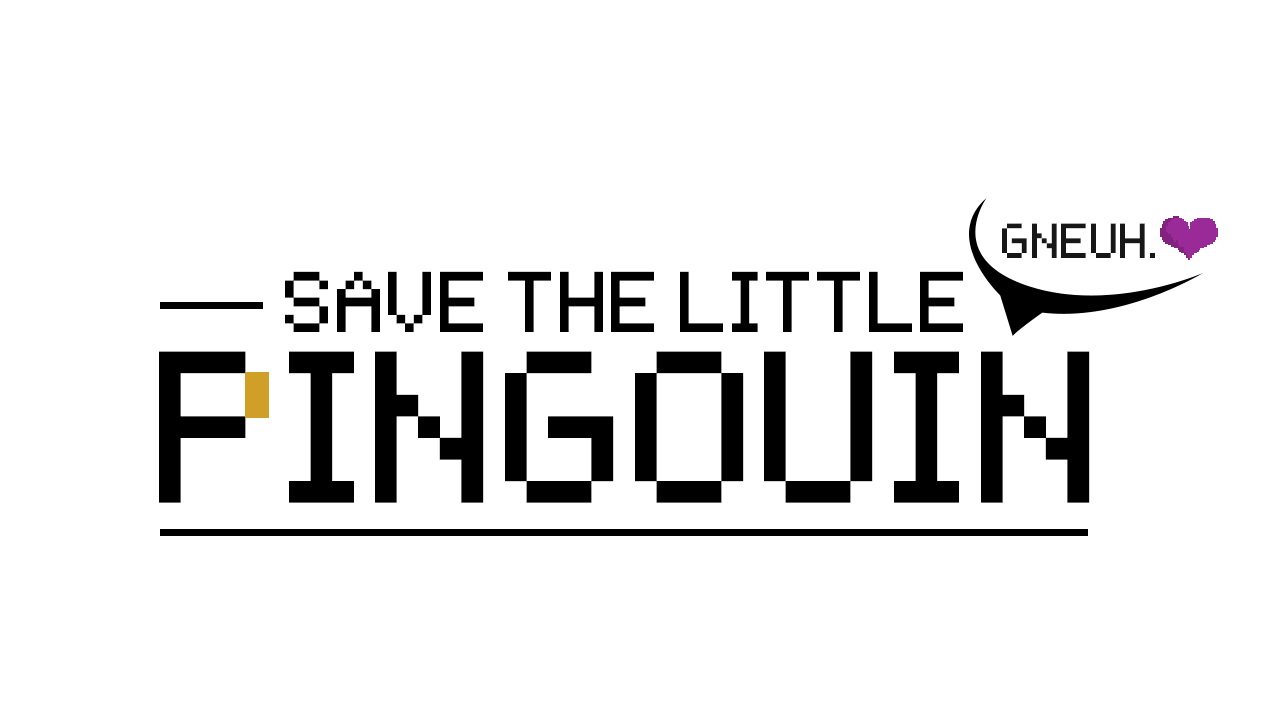
<style>
.page{position:relative;width:1280px;height:720px;background:#ffffff}
.page>*{position:absolute;margin:0}
.t1{font:79px "Pixeltype";color:#171717}
.t2{font:137.2px "Pixeltype";color:#000000}
.t3{font:345.4px "Pixeltype";color:#000000}
</style>
<div class="page">
<p class="t1" style="left:1002px;top:223px;width:153px;height:35px">GNEUH.</p>
<p class="t2" style="left:285px;top:271px;width:678px;height:61px">SAVE THE LITTLE</p>
<p class="t3" style="left:159px;top:351px;width:931px;height:152px">PINGOUIN</p>
</div>
